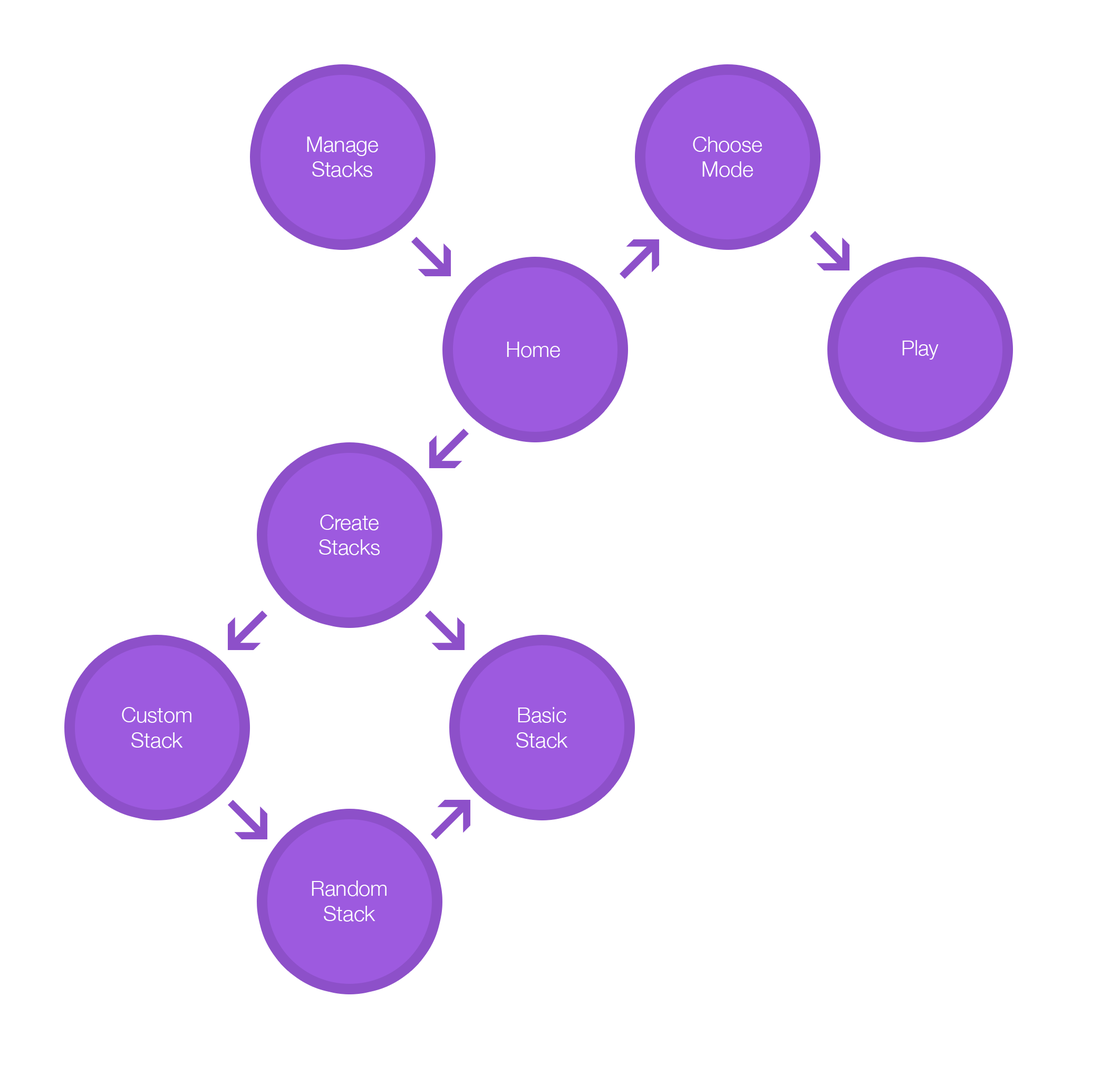
<style>
.page{position:relative;width:1120px;height:1065px;background:#ffffff}
.page>*{position:absolute;margin:0}
.t1{font:20.9px "HelveticaNeue-Light";color:#ffffff}
</style>
<div class="page">
<p class="t1" style="left:307px;top:137px;width:71px;height:40px;text-align:center">Manage<br>Stacks</p>
<p class="t1" style="left:693px;top:137px;width:69px;height:40px;text-align:center">Choose<br>Mode</p>
<p class="t1" style="left:507px;top:342px;width:53px;height:15px">Home</p>
<p class="t1" style="left:902px;top:340px;width:36px;height:20px">Play</p>
<p class="t1" style="left:319px;top:515px;width:61px;height:40px;text-align:center">Create<br>Stacks</p>
<p class="t1" style="left:122px;top:707px;width:69px;height:41px;text-align:center">Custom<br>Stack</p>
<p class="t1" style="left:516px;top:707px;width:52px;height:41px;text-align:center">Basic<br>Stack</p>
<p class="t1" style="left:312px;top:880px;width:74px;height:42px;text-align:center">Random<br>Stack</p>
</div>
